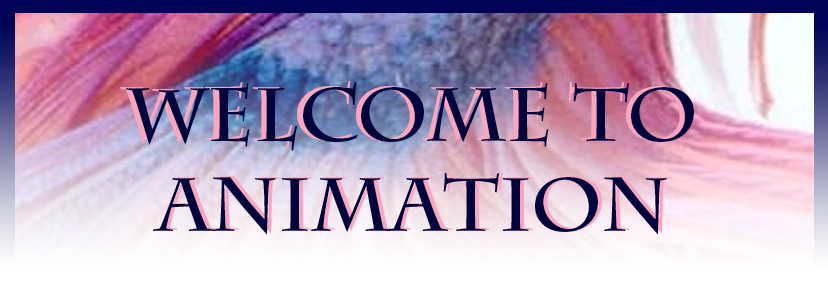
<style>
.page{position:relative;width:828px;height:296px}
.page>*{position:absolute;margin:0}
.t1{font:75px "CharlemagneStd-Bold";color:#00023b}
</style>
<div class="page">
<p class="t1" style="left:126px;top:81px;width:568px;height:154px;text-align:center">Welcome to<br>Animation</p>
</div>
